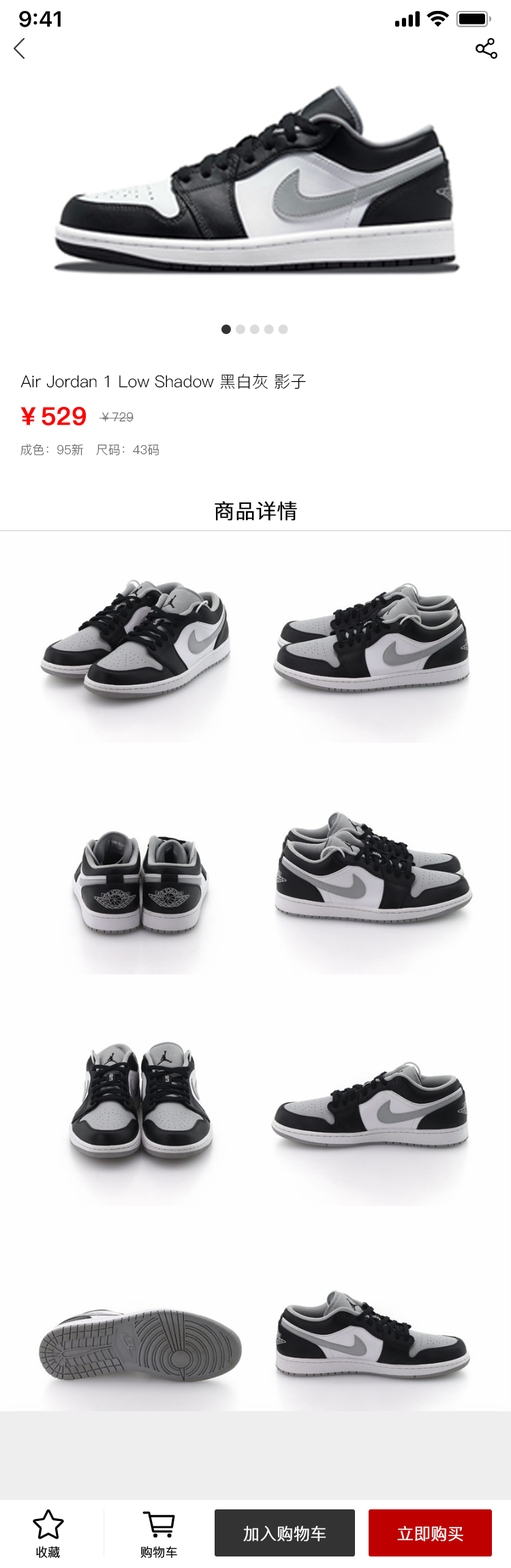
<style>
.page{position:relative;width:511px;height:1568px;background:#fefefe}
.page>*{position:absolute;margin:0}
.t1{font:16.4px "PingFang-SC-Regular";color:#000000}
.t2{font:24.5px "PingFang-SC-Bold";color:#ff0000;font-weight:bold}
.t3{font:12.3px "PingFang-SC-Regular";color:#666666}
.t4{font:20.5px "PingFang-SC-Regular";color:#000000;font-weight:bold}
.t5{font:16.4px "PingFang-SC-Regular";color:#ffffff;font-weight:bold}
.t6{font:12.3px "PingFang-SC-Regular";color:#000000;font-weight:bold}
</style>
<div class="page">
<p class="t1" style="left:20px;top:374px;width:286px;height:15px">Air Jordan 1 Low Shadow 黑白灰 影子</p>
<p class="t2" style="left:20px;top:406px;width:66px;height:19px">￥529</p>
<p class="t3" style="left:99px;top:412px;width:35px;height:10px">￥729</p>
<p class="t3" style="left:20px;top:444px;width:139px;height:11px">成色：95新   尺码：43码</p>
<p class="t4" style="left:215px;top:501px;width:82px;height:20px">商品详情</p>
<p class="t5" style="left:243px;top:1526px;width:84px;height:15px">加入购物车</p>
<p class="t5" style="left:397px;top:1526px;width:67px;height:15px">立即购买</p>
<p class="t6" style="left:36px;top:1546px;width:24px;height:12px">收藏</p>
<p class="t6" style="left:140px;top:1546px;width:37px;height:12px">购物车</p>
</div>
